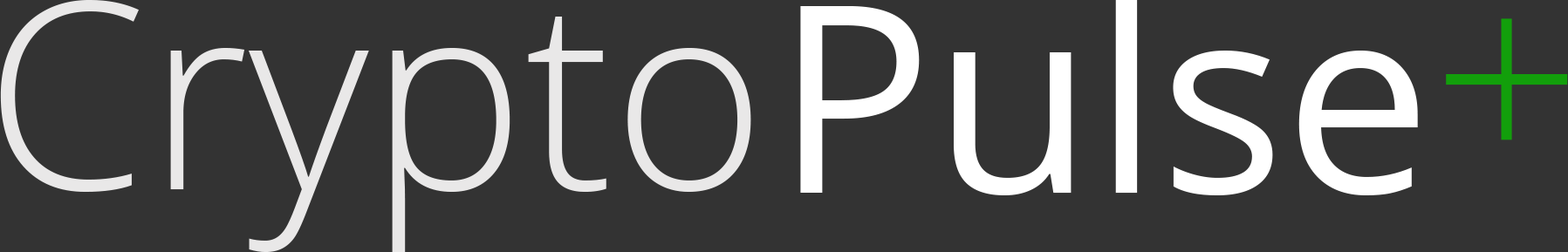
<style>
.page{position:relative;width:1568px;height:252px;background:#333333}
.page>*{position:absolute;margin:0}
.t1{font:261.8px "OpenSans-Light";color:#e9e8e8}
.t2{font:261.8px "OpenSans-Light";color:#129f0b}
</style>
<div class="page">
<p class="t1" style="left:0px;top:0px;width:751px;height:252px">Crypto</p>
<p class="t2" style="left:1446px;top:18px;width:122px;height:122px">+</p>
</div>
